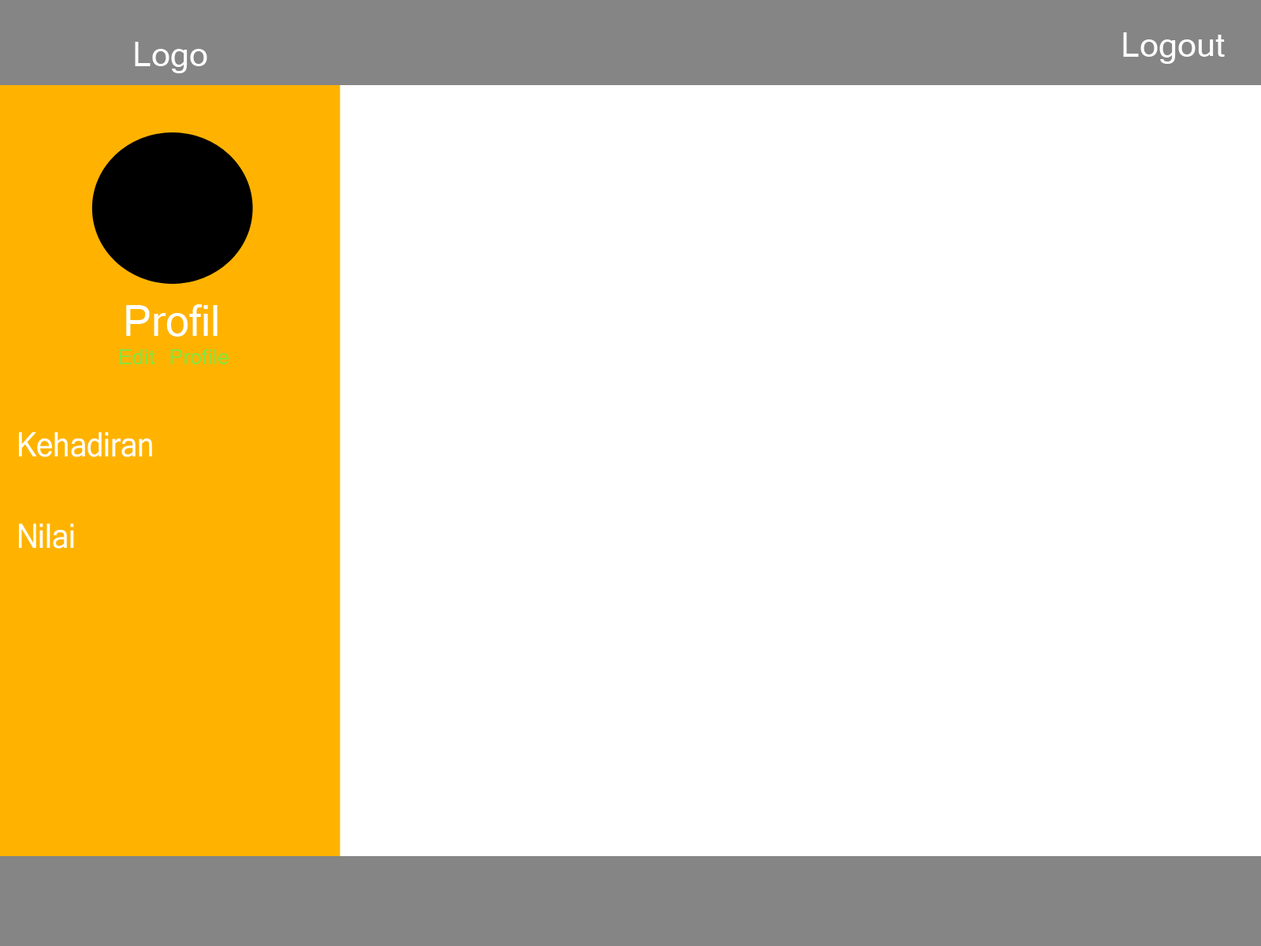
<style>
.page{position:relative;width:1261px;height:946px;background:#ffffff}
.page>*{position:absolute;margin:0}
.t1{font:37.8px "Vrinda";color:#fefefe}
.t2{font:47.3px "Vrinda";color:#ffffff}
.t3{font:23.6px "Vrinda";color:#88e33e}
.t4{font:37.8px "Vrinda";color:#ffffff;scale:0.89 1}
</style>
<div class="page">
<p class="t1" style="left:135px;top:42px;width:72px;height:31px">Logo</p>
<p class="t1" style="left:1123px;top:32px;width:102px;height:32px">Logout</p>
<p class="t2" style="left:126px;top:304px;width:92px;height:33px">Profil</p>
<p class="t3" style="left:120px;top:349px;width:109px;height:15px">Edit Profile</p>
<p class="t4" style="left:19px;top:432px;width:133px;height:116px">Kehadiran <br><br>Nilai</p>
</div>
